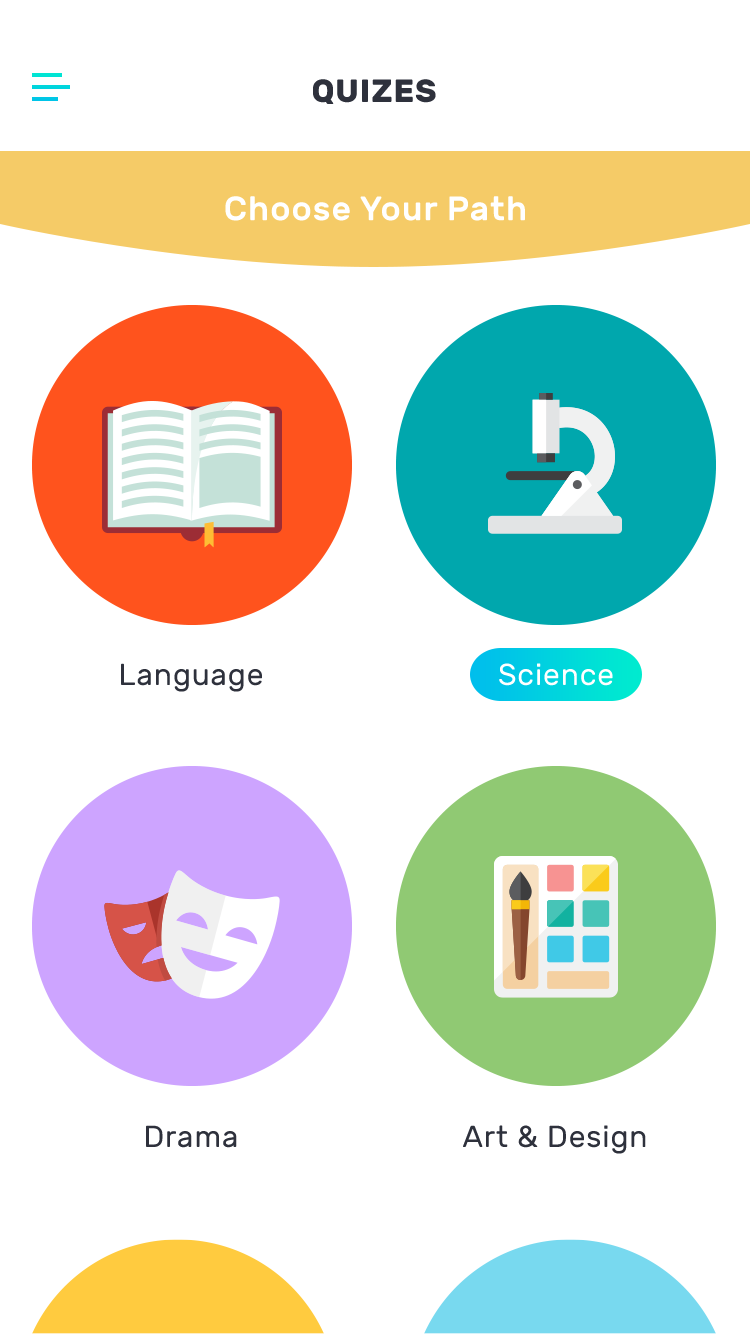
<style>
.page{position:relative;width:750px;height:1334px;background:#ffffff}
.page>*{position:absolute;margin:0}
.t1{font:32px "Rubik-Bold";letter-spacing:0.03em;color:#2e313c}
.t2{font:34px "Rubik-Medium";letter-spacing:0.03em;color:#ffffff}
.t3{font:30px "Rubik-Regular";letter-spacing:0.03em;color:#2e313c}
.t4{font:30px "Rubik-Regular";letter-spacing:0.03em;color:#ffffff}
</style>
<div class="page">
<p class="t1" style="left:313px;top:79px;width:123px;height:25px">QUIZES</p>
<p class="t2" style="left:225px;top:196px;width:300px;height:25px">Choose Your Path</p>
<p class="t3" style="left:121px;top:663px;width:141px;height:29px">Language</p>
<p class="t4" style="left:499px;top:663px;width:114px;height:23px">Science</p>
<p class="t3" style="left:146px;top:1125px;width:91px;height:23px">Drama</p>
<p class="t3" style="left:463px;top:1125px;width:183px;height:29px">Art &amp; Design</p>
</div>
